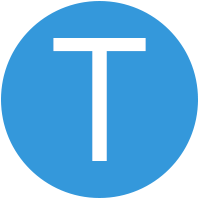
<style>
.page{position:relative;width:200px;height:200px;background:#3498db}
.page>*{position:absolute;margin:0}
.t1{font:172px "OpenSans";letter-spacing:0.12em;color:#ffffff;text-transform:uppercase}
</style>
<div class="page">
<p class="t1" style="left:53px;top:38px;width:93px;height:123px">T</p>
</div>
